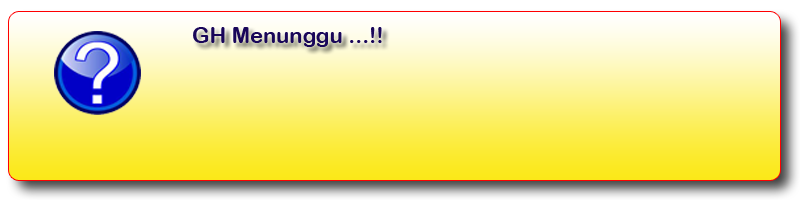
<style>
.page{position:relative;width:800px;height:200px}
.page>*{position:absolute;margin:0}
.t1{font:22px "ArialRoundedMTBold";color:#190659}
</style>
<div class="page">
<p class="t1" style="left:193px;top:27px;width:189px;height:20px">GH Menunggu ...!!</p>
</div>
